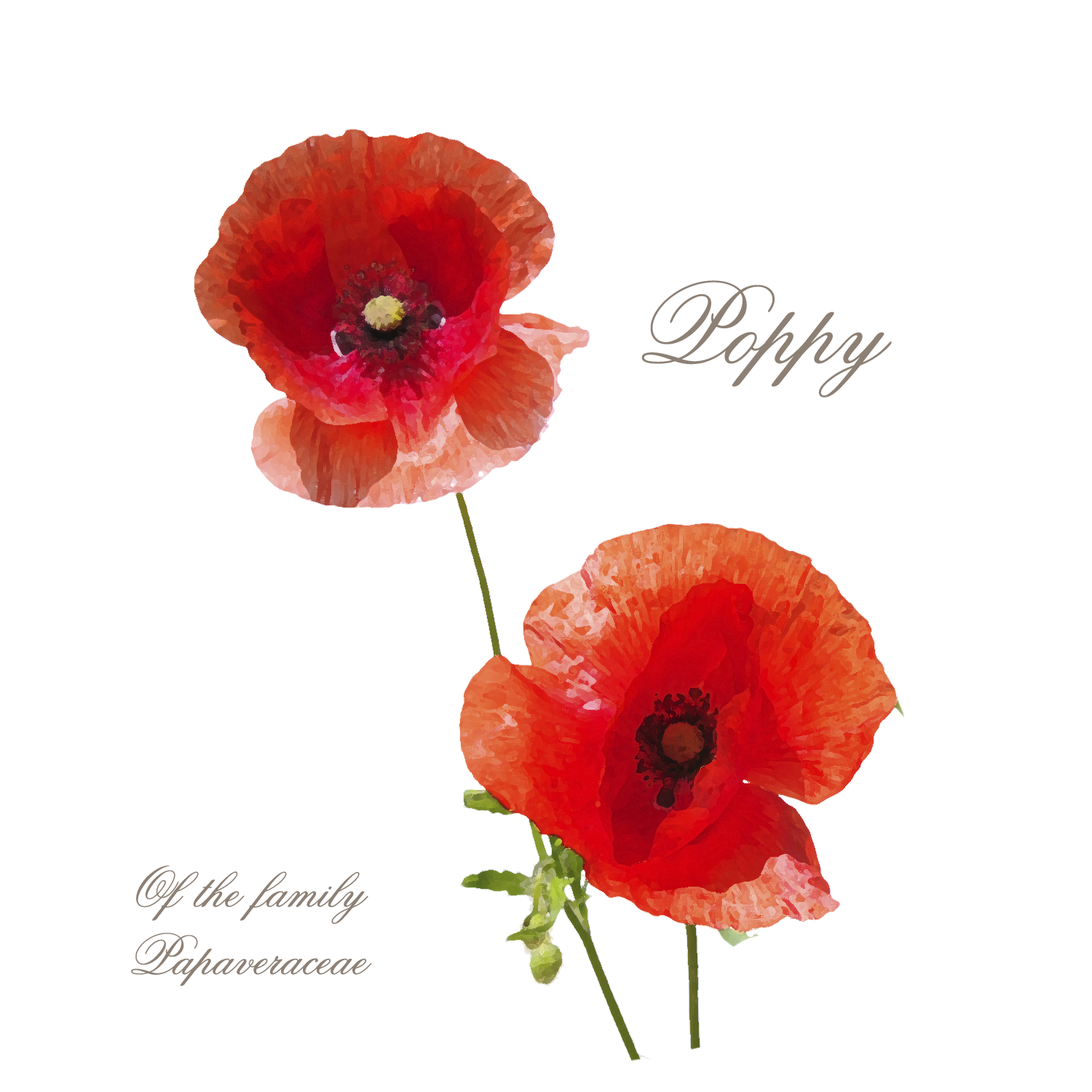
<style>
.page{position:relative;width:1092px;height:1092px;background:#ffffff}
.page>*{position:absolute;margin:0}
.t1{font:112.4px "Old-Scrip";color:#8d8074}
.t2{font:56.2px "Old-Scrip";color:#8d8074}
</style>
<div class="page">
<p class="t1" style="left:641px;top:280px;width:251px;height:117px">Poppy</p>
<p class="t2" style="left:131px;top:865px;width:241px;height:121px;text-align:center">Of the family<br>Papaveraceae</p>
</div>
